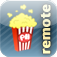
<style>
.page{position:relative;width:57px;height:57px}
.page>*{position:absolute;margin:0}
.t1{font:14px "Ebrima-Bold";font-weight:bold}
</style>
<div class="page">
<p class="t1" style="left:40px;top:4px;width:11px;height:50px;rotate:-90deg">remote</p>
</div>
